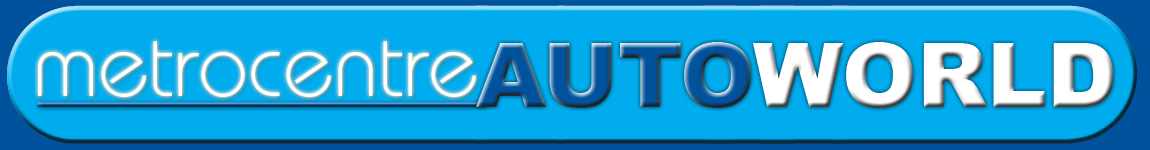
<style>
.page{position:relative;width:1150px;height:150px;background:#00acee}
.page>*{position:absolute;margin:0}
.t1{font:90px "Bauhaus-Light";color:#ffffff}
.t2{font:90px "Arial-Black";color:#ffffff}
.t3{font:90px "Arial-Black";color:#01529d}
</style>
<div class="page">
<p class="t1" style="left:38px;top:41px;width:438px;height:56px">metrocentre</p>
<p class="t2" style="left:476px;top:42px;width:638px;height:66px"><span class="t3">AUTO</span>WORLD</p>
</div>
